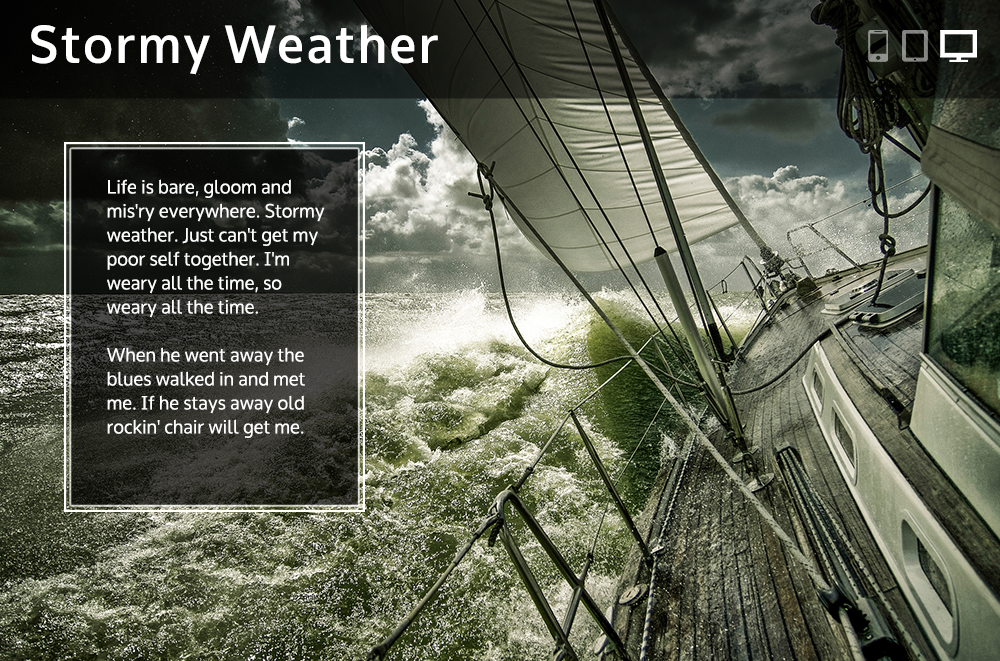
<style>
.page{position:relative;width:1000px;height:661px}
.page>*{position:absolute;margin:0}
.t1{font:52.1px "Oxygen-Sans-Bold";letter-spacing:0.05em;color:#ffffff}
.t2{font:18.8px/24px "Oxygen-Sans-Book";color:#ffffff}
</style>
<div class="page">
<p class="t1" style="left:31px;top:25px;width:407px;height:50px">Stormy Weather</p>
<p class="t2" style="left:107px;top:179px;width:218px;height:259px">Life is bare, gloom and mis'ry everywhere. Stormy weather. Just can't get my poor self together. I'm weary all the time, so weary all the time.<br><br>When he went away the blues walked in and met me. If he stays away old rockin' chair will get me.</p>
</div>
